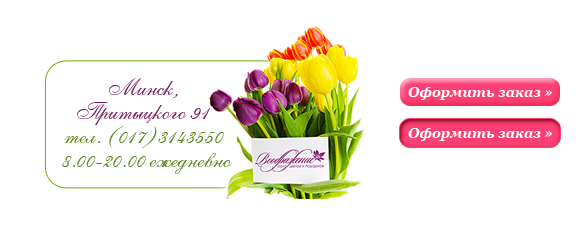
<style>
.page{position:relative;width:588px;height:226px;background:#ffffff}
.page>*{position:absolute;margin:0}
.t1{font:24px/24px "AllegrettoScriptOne";color:#59821a}
.t2{font:24px/24px "AllegrettoScriptOne";color:#77175e}
.t3{font:14px "Georgia-BoldItalic";color:#ffffff}
</style>
<div class="page">
<p class="t1" style="left:62px;top:78px;width:170px;height:96px;text-align:center"><span class="t2">Минск, <br>Притыцкого 91 <br></span>тел. (017)3143550 <br>8.00-20.00 ежедневно</p>
<p class="t3" style="left:408px;top:87px;width:144px;height:13px">Оформить заказ »</p>
<p class="t3" style="left:408px;top:128px;width:144px;height:13px">Оформить заказ »</p>
</div>
